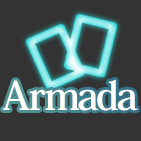
<style>
.page{position:relative;width:141px;height:141px;background:#333333}
.page>*{position:absolute;margin:0}
.t1{font:41px "HeiseiMinStd-W7";letter-spacing:-0.04em;color:#fffef9}
</style>
<div class="page">
<p class="t1" style="left:3px;top:79px;width:135px;height:32px">Armada</p>
</div>
